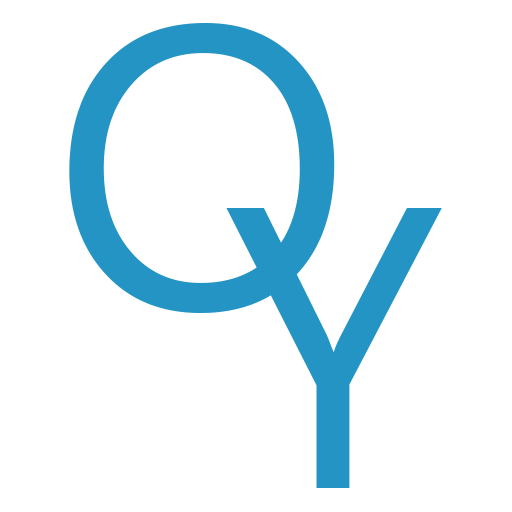
<style>
.page{position:relative;width:512px;height:512px;background:#ffffff}
.page>*{position:absolute;margin:0}
.t1{font:400px "Ebrima";color:#2394c3}
</style>
<div class="page">
<p class="t1" style="left:69px;top:23px;width:266px;height:290px">O</p>
<p class="t1" style="left:226px;top:208px;width:216px;height:280px">Y</p>
</div>
